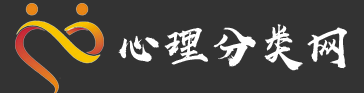
<style>
.page{position:relative;width:364px;height:93px;background:#333333}
.page>*{position:absolute;margin:0}
.t1{font:47px "HYShangWeiShouShuW-Regular";color:#ffffff}
</style>
<div class="page">
<p class="t1" style="left:118px;top:24px;width:229px;height:47px">心理分类网</p>
</div>
